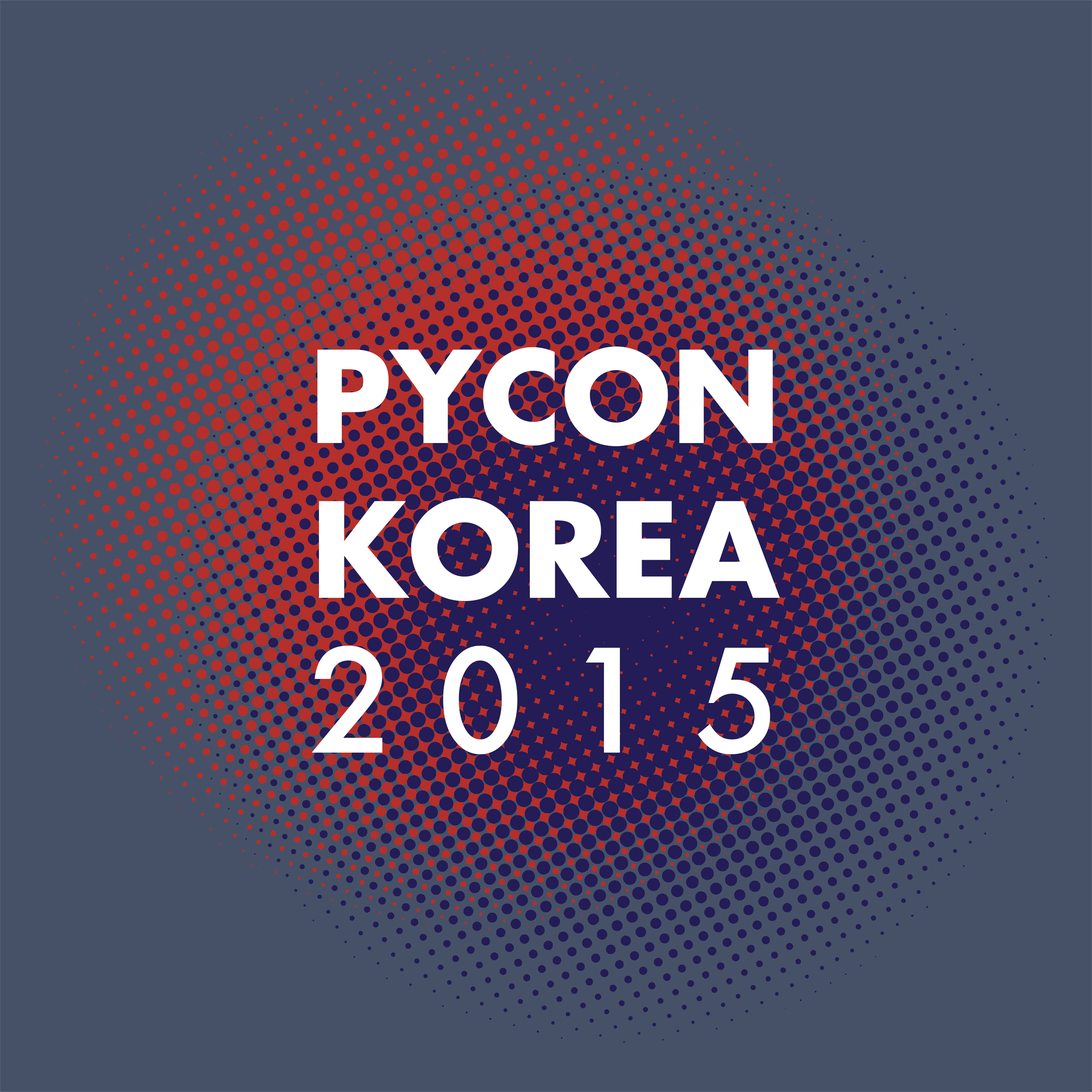
<style>
.page{position:relative;width:1092px;height:1092px;background:#465167}
.page>*{position:absolute;margin:0}
.t1{font:139.3px/154.8px "Futura-Medium";color:#ffffff}
.t2{font:123.8px/154.8px "Futura-Bold";color:#ffffff}
.t3{font:128.2px/154.8px "Futura-Bold";color:#ffffff}
</style>
<div class="page">
<p class="t1" style="left:312px;top:346px;width:468px;height:408px;text-align:center"><span class="t2">PYCON<br></span><span class="t3">KOREA<br></span>2 0 1 5</p>
</div>
